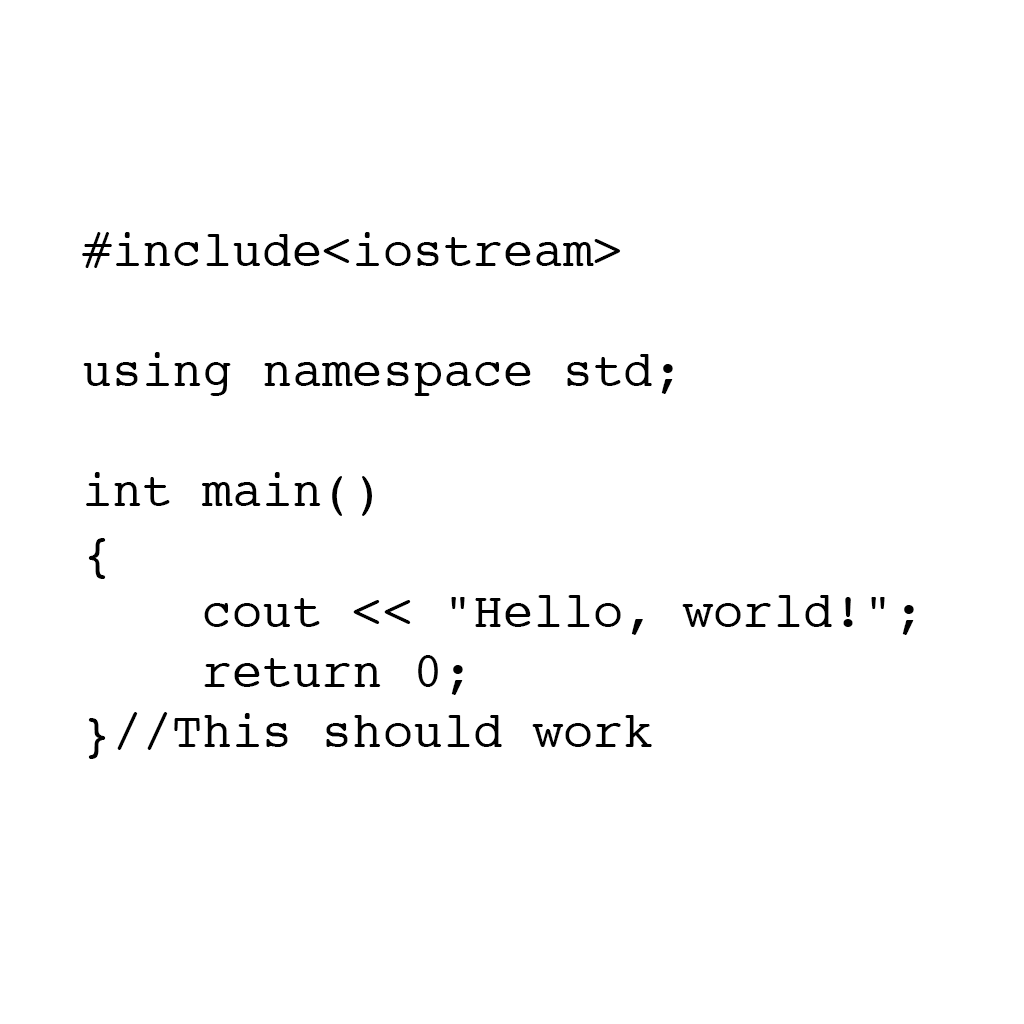
<style>
.page{position:relative;width:1024px;height:1024px;background:#ffffff}
.page>*{position:absolute;margin:0}
.t1{font:25px "Courier";color:#000000}
</style>
<div class="page">
<p class="t1" style="left:82px;top:232px;width:832px;height:527px">#include&lt;iostream&gt;<br><br>using namespace std;<br><br>int main() <br>{<br>    cout &lt;&lt; "Hello, world!";<br>    return 0;<br>}//This should work</p>
</div>
